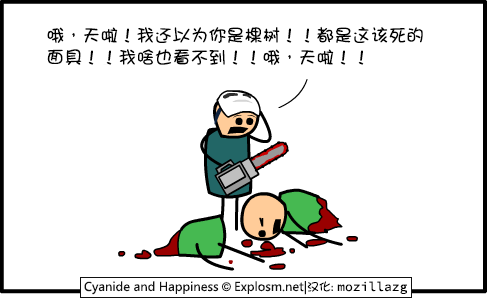
<style>
.page{position:relative;width:488px;height:299px;background:#ffffff}
.page>*{position:absolute;margin:0}
.t1{font:18px/22px "DFGirl";color:#000000}
</style>
<div class="page">
<p class="t1" style="left:47px;top:26px;width:376px;height:39px">哦，天啦！我还以为你是棵树！！都是这该死的<br>面具！！我啥也看不到！！哦，天啦！！</p>
</div>
